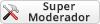
<style>
.page{position:relative;width:100px;height:24px}
.page>*{position:absolute;margin:0}
.t1{font:11px/11px "OpenSans-Semibold";color:#303030;font-weight:bold}
</style>
<div class="page">
<p class="t1" style="left:29px;top:2px;width:61px;height:20px;text-align:center">Super<br>Moderador</p>
</div>
